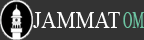
<style>
.page{position:relative;width:144px;height:40px;background:#333333}
.page>*{position:absolute;margin:0}
.t1{font:24px "TimesNewRomanPSMT";color:#ffffff;scale:0.89 1}
.t2{font:24px "TimesNewRomanPSMT";color:#6dc5a3;scale:0.54 1}
</style>
<div class="page">
<p class="t1" style="left:33px;top:12px;width:87px;height:16px">JAMMAT</p>
<p class="t2" style="left:123px;top:12px;width:21px;height:16px">OM</p>
</div>
